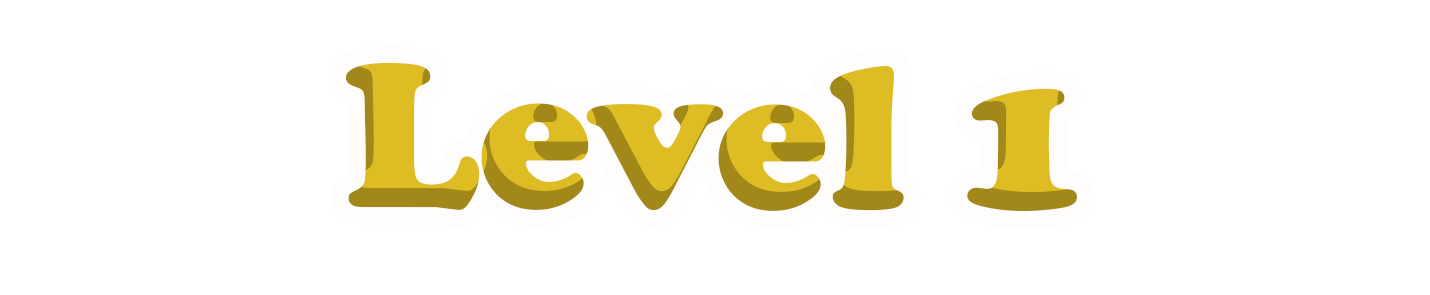
<style>
.page{position:relative;width:1430px;height:295px;background:#ffffff}
.page>*{position:absolute;margin:0}
.t1{font:213px "CooperBlack";color:#debd24}
</style>
<div class="page">
<p class="t1" style="left:345px;top:62px;width:732px;height:149px">Level 1</p>
</div>
